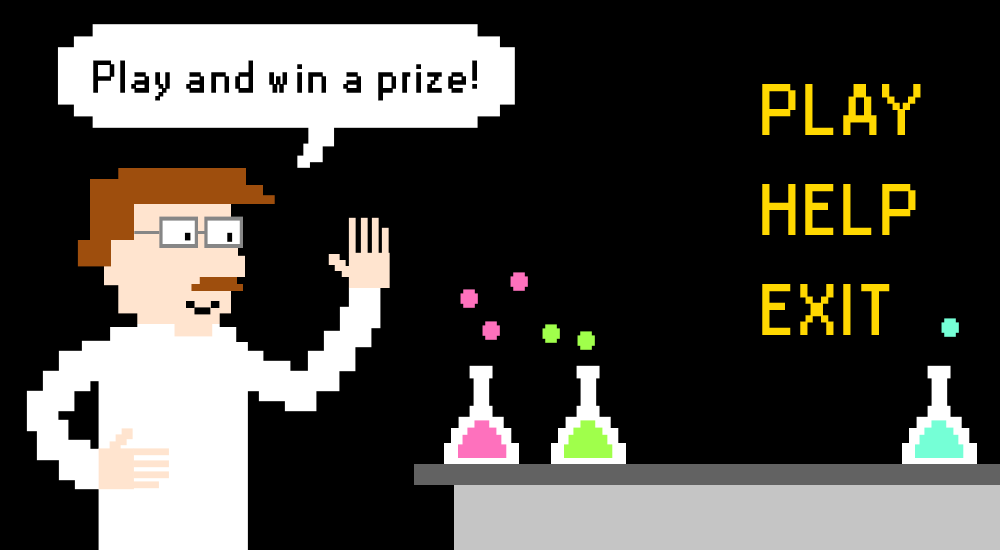
<style>
.page{position:relative;width:1000px;height:550px;background:#000000}
.page>*{position:absolute;margin:0}
.t1{font:42.1px "Small Fonts";letter-spacing:0.1em;color:#000000;font-weight:bold}
.t2{font:66.7px/100px "Small Fonts";letter-spacing:0.1em;color:#ffd800;font-weight:bold}
</style>
<div class="page">
<p class="t1" style="left:93px;top:60px;width:384px;height:41px">Play and win a prize!</p>
<p class="t2" style="left:762px;top:84px;width:159px;height:251px">PLAY<br>HELP<br>EXIT</p>
</div>
